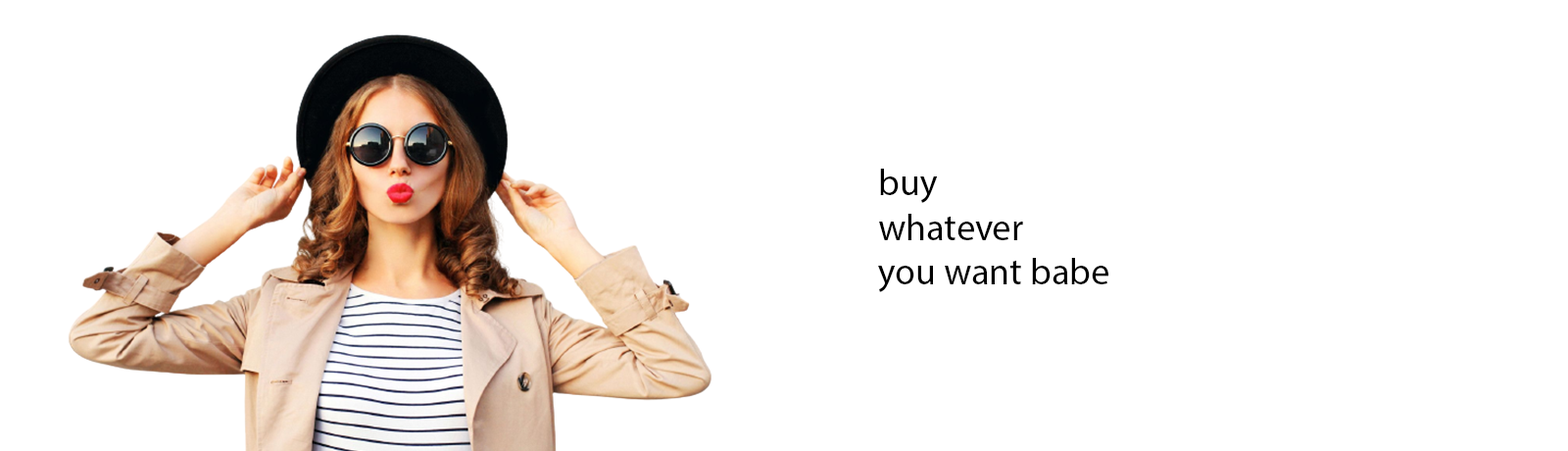
<style>
.page{position:relative;width:1568px;height:451px;background:#ffffff}
.page>*{position:absolute;margin:0}
.t1{font:37.2px "MyriadPro-Regular";color:#000000}
</style>
<div class="page">
<p class="t1" style="left:878px;top:169px;width:230px;height:123px">buy <br>whatever<br>you want babe</p>
</div>
